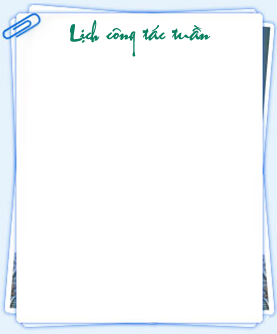
<style>
.page{position:relative;width:277px;height:334px;background:#ffffff}
.page>*{position:absolute;margin:0}
.t1{font:18px "VNI-Thufap1";color:#098060}
</style>
<div class="page">
<p class="t1" style="left:70px;top:20px;width:141px;height:37px;text-align:center">Lòch coâng taùc tuaàn</p>
</div>
